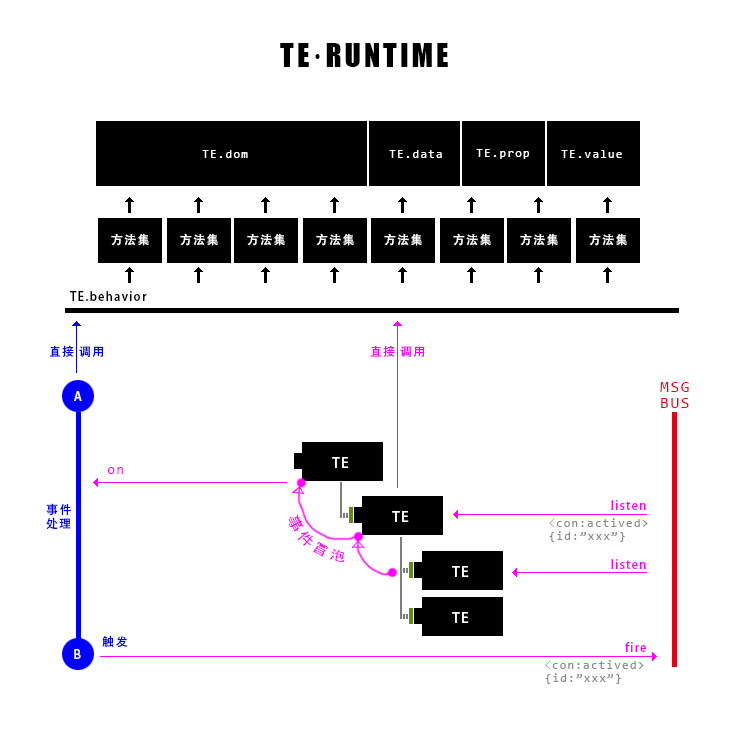
<style>
.page{position:relative;width:742px;height:734px;background:#ffffff}
.page>*{position:absolute;margin:0}
.t1{font:30px "Impact";letter-spacing:0.1em;color:#000000}
.t2{font:12px "Consolas";letter-spacing:0.1em;color:#ffffff}
.t3{font:12px "AdobeHeitiStd-Regular";letter-spacing:0.1em;color:#000000}
.t4{font:12px "AdobeHeitiStd-Regular";letter-spacing:0.1em;color:#0000ff}
.t5{font:12px "AdobeHeitiStd-Regular";letter-spacing:0.1em;color:#ff00ff}
.t6{font:16px/16px "Consolas";letter-spacing:0.1em;color:#e60012}
.t7{font:12px "AdobeHeitiStd-Regular";letter-spacing:0.1em;color:#ffffff}
.t8{font:14px "Consolas";letter-spacing:0.1em;color:#ff00ff}
.t9{font:12px/14px "AdobeHeitiStd-Regular";letter-spacing:0.1em;color:#0000ff}
.t10{font:14px "AdobeHeitiStd-Regular";letter-spacing:0.1em;color:#ff02ff}
.t11{font:12px/14px "Consolas";letter-spacing:0.1em;color:#898989}
.t12{font:12px/14px "SimSun";letter-spacing:0.1em;color:#898989}
</style>
<div class="page">
<p class="t1" style="left:280px;top:43px;width:168px;height:24px">TE·RUNTIME</p>
<p class="t2" style="left:202px;top:150px;width:46px;height:8px">TE.dom</p>
<p class="t2" style="left:389px;top:150px;width:53px;height:8px">TE.data</p>
<p class="t2" style="left:476px;top:149px;width:53px;height:10px">TE.prop</p>
<p class="t2" style="left:561px;top:150px;width:61px;height:8px">TE.value</p>
<p class="t3" style="left:69px;top:291px;width:78px;height:10px">TE.behavior</p>
<p class="t4" style="left:49px;top:345px;width:55px;height:12px">直接 调用</p>
<p class="t5" style="left:370px;top:345px;width:55px;height:12px">直接 调用</p>
<p class="t6" style="left:660px;top:382px;width:29px;height:26px;text-align:center">MSG<br>BUS</p>
<p class="t7" style="left:74px;top:391px;width:8px;height:10px">A</p>
<p class="t8" style="left:107px;top:467px;width:16px;height:7px">on</p>
<p class="t9" style="left:46px;top:503px;width:25px;height:26px">事件<br>处理</p>
<p class="t5" style="left:611px;top:500px;width:35px;height:10px">listen</p>
<p class="t10" style="left:288px;top:514px;width:57px;height:49px;rotate:37deg">事件冒泡</p>
<p class="t11" style="left:549px;top:518px;width:99px;height:24px"><span class="t12">&lt;</span>con:actived&gt;<br>{id:”xxx”}</p>
<p class="t5" style="left:611px;top:559px;width:35px;height:10px">listen</p>
<p class="t4" style="left:102px;top:635px;width:26px;height:13px">触发</p>
<p class="t7" style="left:74px;top:649px;width:7px;height:10px">B</p>
<p class="t5" style="left:625px;top:642px;width:21px;height:10px">fire</p>
<p class="t11" style="left:545px;top:660px;width:99px;height:24px"><span class="t12">&lt;</span>con:actived&gt;<br>{id:”xxx”}</p>
</div>
